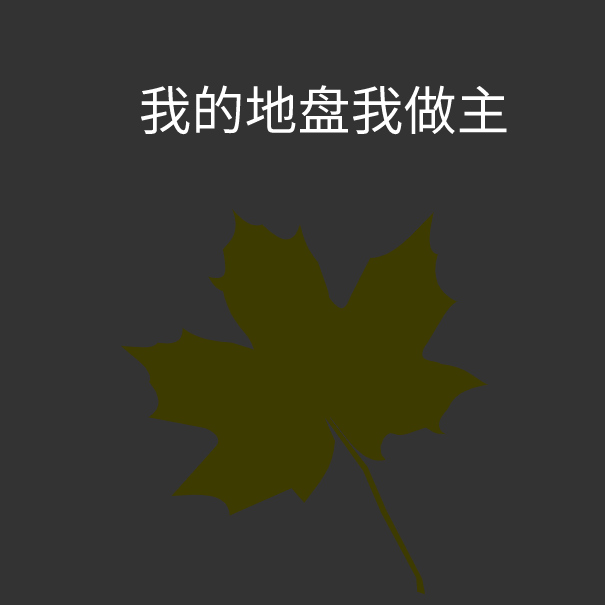
<style>
.page{position:relative;width:605px;height:605px;background:#333333}
.page>*{position:absolute;margin:0}
.t1{font:53px "SourceHanSansSC-Regular";color:#ffffff}
</style>
<div class="page">
<p class="t1" style="left:140px;top:85px;width:367px;height:50px">我的地盘我做主</p>
</div>
